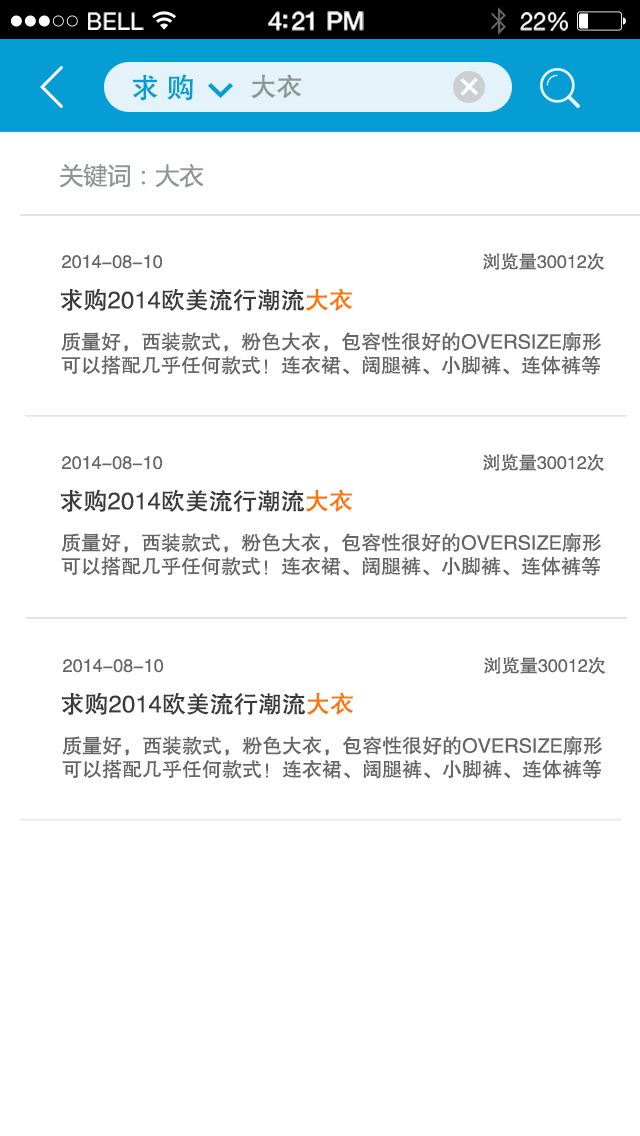
<style>
.page{position:relative;width:640px;height:1136px;background:#ffffff}
.page>*{position:absolute;margin:0}
.t1{font:23.1px "HelveticaNeue";letter-spacing:0.02em;color:#ffffff}
.t2{font:25.1px "HelveticaNeue-Medium";letter-spacing:-0.02em;color:#ffffff}
.t3{font:24.1px "HelveticaNeue";letter-spacing:-0.02em;color:#ffffff}
.t4{font:28px "FZHTJW--GB1-0";color:#069dd4}
.t5{font:26px "FZHTJW--GB1-0";color:#8d9695}
.t6{font:42.3px "MicrosoftYaHei";color:#ffffff}
.t7{font:24px "MicrosoftYaHei";color:#8d9695}
.t8{font:18px "FZHTJW--GB1-0";color:#666666}
.t9{font:24px "FZHTJW--GB1-0";color:#3a3a3a}
.t10{font:24px "FZHTJW--GB1-0";color:#ff7300}
.t11{font:20px/4.5px "FZHTJW--GB1-0";color:#666666}
.t12{font:21.3px/4.5px "FZHTJW--GB1-0";color:#000504}
</style>
<div class="page">
<p class="t1" style="left:88px;top:12px;width:56px;height:18px">BELL</p>
<p class="t2" style="left:268px;top:11px;width:96px;height:20px">4:21 PM</p>
<p class="t3" style="left:520px;top:12px;width:48px;height:19px">22%</p>
<p class="t4" style="left:133px;top:74px;width:60px;height:27px">求 购</p>
<p class="t5" style="left:251px;top:74px;width:51px;height:25px">大衣</p>
<p class="t6" style="left:460px;top:77px;width:18px;height:19px;rotate:43deg">+</p>
<p class="t7" style="left:59px;top:163px;width:145px;height:25px">关键词：大衣</p>
<p class="t8" style="left:62px;top:253px;width:543px;height:17px">2014-08-10                                                                浏览量30012次</p>
<p class="t9" style="left:61px;top:288px;width:291px;height:23px">求购2014欧美流行潮流<span class="t10">大衣</span></p>
<p class="t11" style="left:61px;top:332px;width:540px;height:43px"><span class="t12"><br> <br><br><br><br><br></span>质量好，西装款式，粉色大衣，包容性很好的OVERSIZE廓形<br><br><br>可以搭配几乎任何款式！连衣裙、阔腿裤、小脚裤、连体裤等</p>
<p class="t8" style="left:62px;top:454px;width:543px;height:17px">2014-08-10                                                                浏览量30012次</p>
<p class="t9" style="left:61px;top:489px;width:291px;height:23px">求购2014欧美流行潮流<span class="t10">大衣</span></p>
<p class="t11" style="left:61px;top:533px;width:540px;height:43px"><span class="t12"><br> <br><br><br><br><br></span>质量好，西装款式，粉色大衣，包容性很好的OVERSIZE廓形<br><br><br>可以搭配几乎任何款式！连衣裙、阔腿裤、小脚裤、连体裤等</p>
<p class="t8" style="left:63px;top:657px;width:543px;height:17px">2014-08-10                                                                浏览量30012次</p>
<p class="t9" style="left:62px;top:692px;width:291px;height:23px">求购2014欧美流行潮流<span class="t10">大衣</span></p>
<p class="t11" style="left:62px;top:736px;width:540px;height:43px"><span class="t12"><br> <br><br><br><br><br></span>质量好，西装款式，粉色大衣，包容性很好的OVERSIZE廓形<br><br><br>可以搭配几乎任何款式！连衣裙、阔腿裤、小脚裤、连体裤等</p>
</div>
